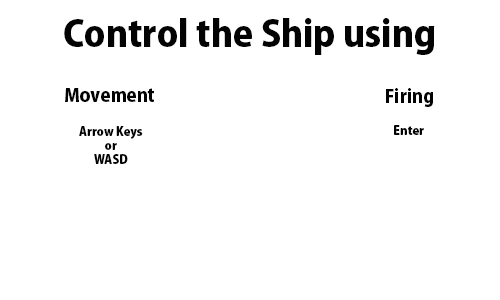
<style>
.page{position:relative;width:500px;height:300px;background:#ffffff}
.page>*{position:absolute;margin:0}
.t1{font:36px "KozGoPr6N-Heavy";color:#030303}
.t2{font:18px "KozGoPr6N-Heavy";color:#030303}
.t3{font:12px "KozGoPr6N-Heavy";color:#030303}
</style>
<div class="page">
<p class="t1" style="left:64px;top:18px;width:371px;height:37px">Control the Ship using</p>
<p class="t2" style="left:65px;top:88px;width:89px;height:14px">Movement</p>
<p class="t2" style="left:386px;top:88px;width:47px;height:19px">Firing</p>
<p class="t3" style="left:79px;top:126px;width:64px;height:38px;text-align:center">Arrow Keys<br>or<br>WASD</p>
<p class="t3" style="left:394px;top:125px;width:30px;height:10px">Enter</p>
</div>
